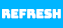
<style>
.page{position:relative;width:63px;height:28px;background:#00b5ff}
.page>*{position:absolute;margin:0}
.t1{font:12.5px "BungeeLayers-Regular";color:#ffffff}
</style>
<div class="page">
<p class="t1" style="left:2px;top:9px;width:59px;height:10px">REFRESH</p>
</div>
